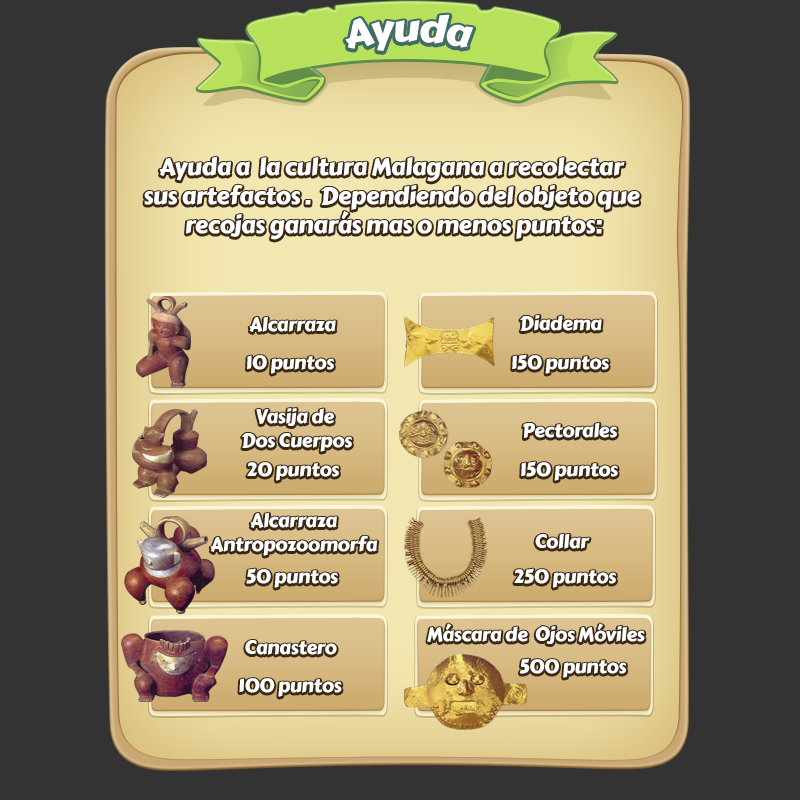
<style>
.page{position:relative;width:800px;height:800px;background:#333333}
.page>*{position:absolute;margin:0}
.t1{font:38px "CarterOne";letter-spacing:-0.02em;color:#ffffff}
.t2{font:24px "CarterOne";letter-spacing:-0.02em;color:#ffffff}
.t3{font:19.1px "CarterOne";letter-spacing:-0.02em;color:#ffffff}
.t4{font:19.1px/24px "CarterOne";letter-spacing:-0.02em;color:#ffffff}
</style>
<div class="page">
<p class="t1" style="left:345px;top:14px;width:129px;height:37px">Ayuda</p>
<p class="t2" style="left:144px;top:156px;width:496px;height:84px;text-align:center">Ayuda a  la cultura Malagana a recolectar <br>sus artefactos .  Dependiendo del objeto que <br>recojas ganarás mas o menos puntos:</p>
<p class="t3" style="left:249px;top:316px;width:87px;height:16px">Alcarraza</p>
<p class="t3" style="left:520px;top:314px;width:82px;height:17px">Diadema</p>
<p class="t3" style="left:247px;top:355px;width:87px;height:19px">10 puntos</p>
<p class="t3" style="left:512px;top:354px;width:97px;height:20px">150 puntos</p>
<p class="t4" style="left:242px;top:407px;width:110px;height:45px;text-align:center">Vasija de <br>Dos Cuerpos</p>
<p class="t3" style="left:523px;top:422px;width:94px;height:16px">Pectorales</p>
<p class="t3" style="left:247px;top:462px;width:92px;height:19px">20 puntos</p>
<p class="t3" style="left:521px;top:461px;width:97px;height:20px">150 puntos</p>
<p class="t4" style="left:210px;top:512px;width:168px;height:44px;text-align:center">Alcarraza <br>Antropozoomorfa</p>
<p class="t3" style="left:535px;top:533px;width:55px;height:16px">Collar</p>
<p class="t3" style="left:246px;top:568px;width:92px;height:20px">50 puntos</p>
<p class="t3" style="left:514px;top:568px;width:102px;height:20px">250 puntos</p>
<p class="t3" style="left:427px;top:623px;width:218px;height:21px">Máscara de  Ojos Móviles</p>
<p class="t3" style="left:245px;top:640px;width:92px;height:15px">Canastero</p>
<p class="t3" style="left:519px;top:658px;width:108px;height:20px">500 puntos</p>
<p class="t3" style="left:239px;top:678px;width:103px;height:19px">100 puntos</p>
</div>
